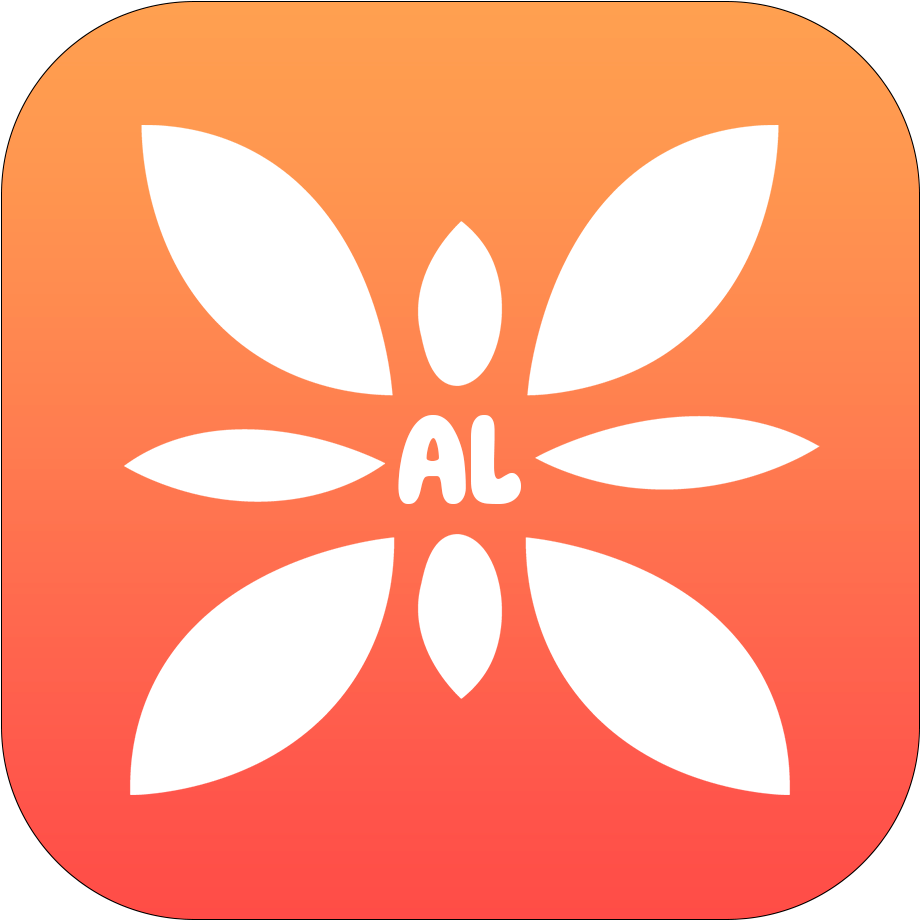
<style>
.page{position:relative;width:920px;height:920px;background:#ffffff}
.page>*{position:absolute;margin:0}
.t1{font:125px "MotleyForces-Regular";color:#ffffff}
</style>
<div class="page">
<p class="t1" style="left:398px;top:415px;width:123px;height:89px">AL</p>
</div>
